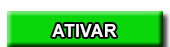
<style>
.page{position:relative;width:170px;height:47px;background:#09d609}
.page>*{position:absolute;margin:0}
.t1{font:18px "Arial-BoldMT";color:#ffffff}
</style>
<div class="page">
<p class="t1" style="left:52px;top:24px;width:65px;height:13px">ATIVAR</p>
</div>
